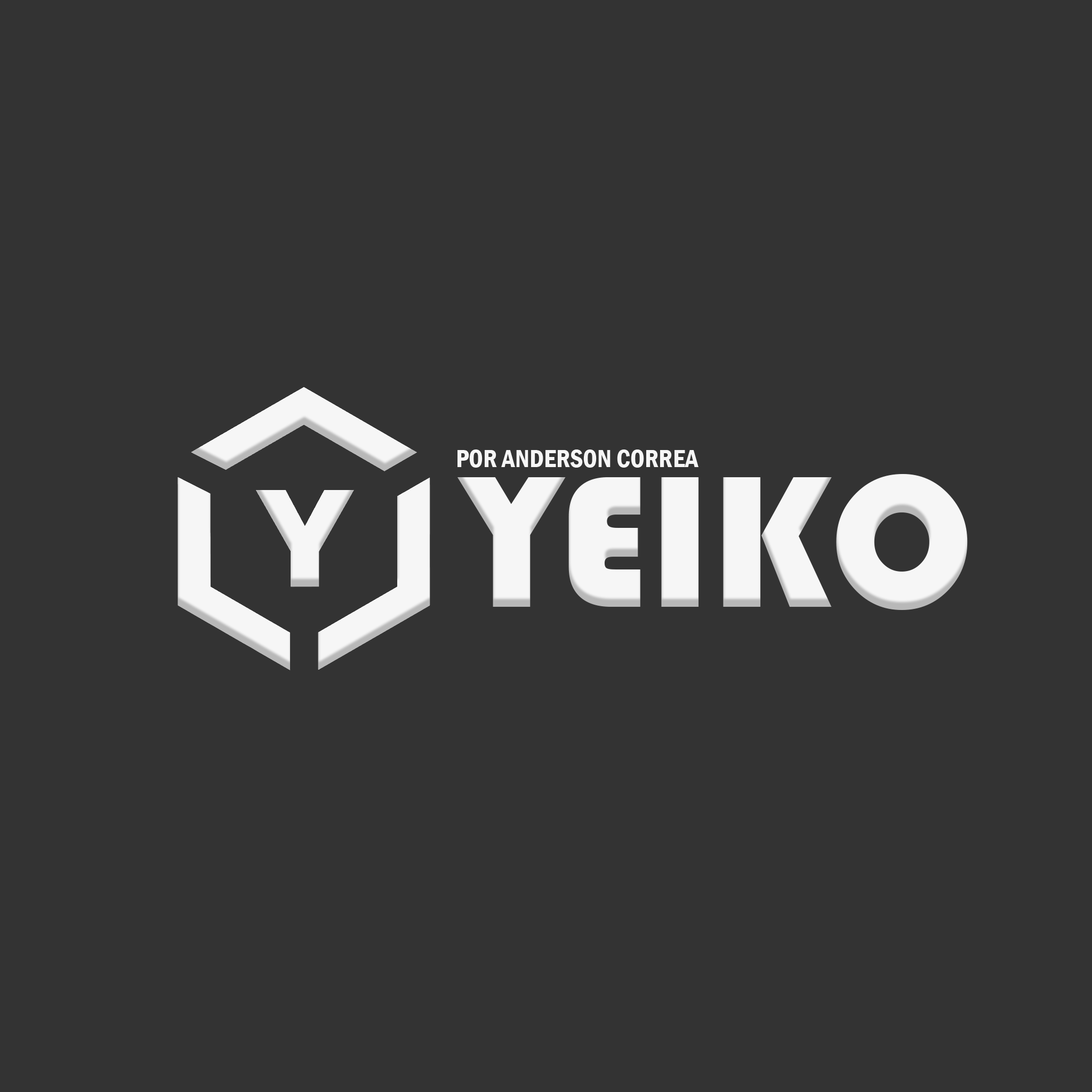
<style>
.page{position:relative;width:1092px;height:1092px;background:#333333}
.page>*{position:absolute;margin:0}
.t1{font:25.6px "FranklinGothic-DemiCond";color:#f6f6f6}
.t2{font:194.3px "Bauhaus93";color:#f6f6f6;scale:0.96 1}
</style>
<div class="page">
<p class="t1" style="left:457px;top:449px;width:241px;height:19px">POR ANDERSON CORREA</p>
<p class="t2" style="left:457px;top:474px;width:511px;height:136px">YEIKO</p>
</div>
